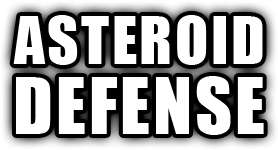
<style>
.page{position:relative;width:278px;height:150px;background:#ffffff}
.page>*{position:absolute;margin:0}
.t1{font:61px/70px "Impact";letter-spacing:0.04em;color:#ffffff}
.t2{font:72px/70px "Impact";letter-spacing:0.04em;color:#ffffff}
</style>
<div class="page">
<p class="t1" style="left:13px;top:15px;width:251px;height:120px;text-align:center">ASTEROID<br><span class="t2">DEFENSE</span></p>
</div>
